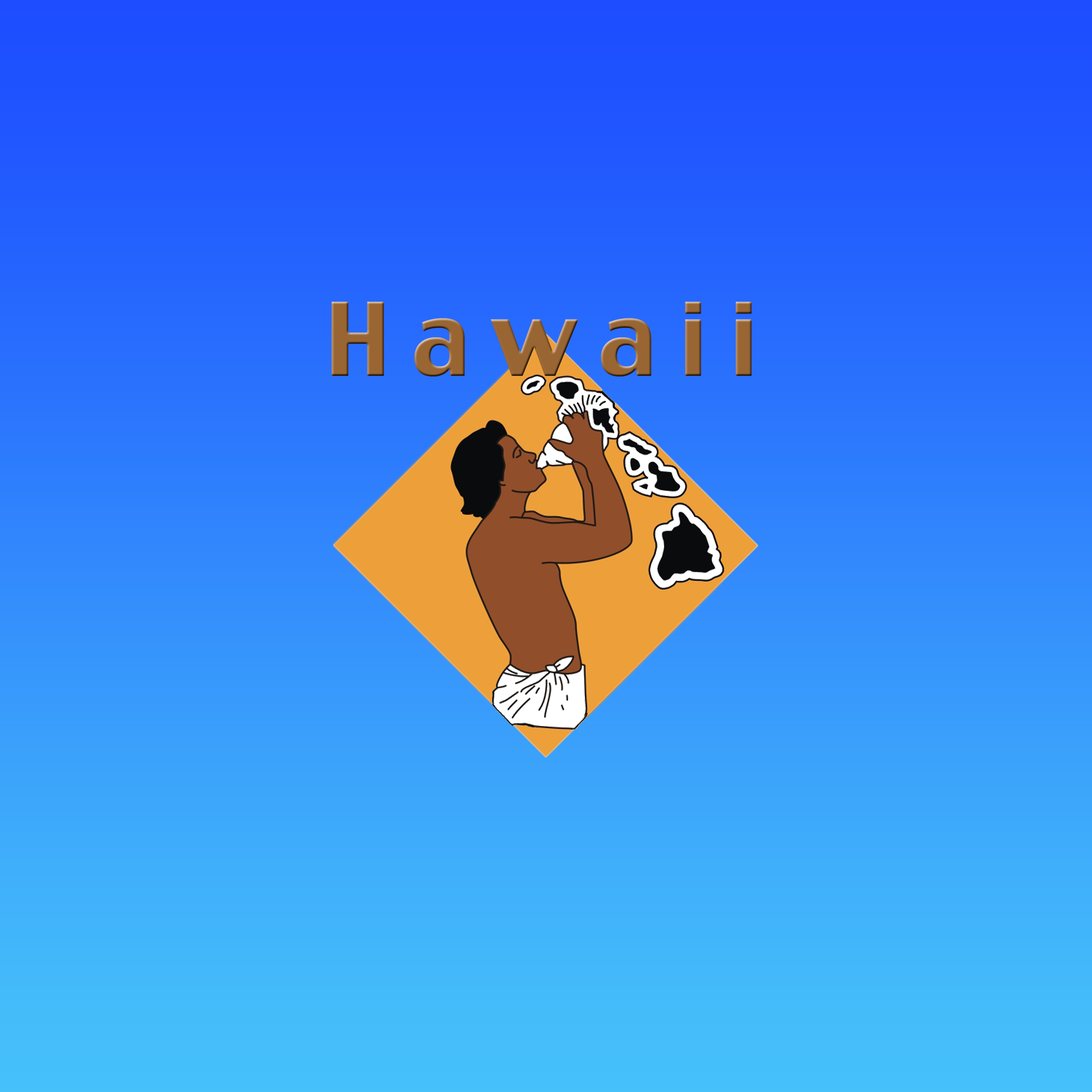
<style>
.page{position:relative;width:1092px;height:1092px}
.page>*{position:absolute;margin:0}
.t1{font:98.9px "CharcoalCY";letter-spacing:0.2em;color:#996633}
</style>
<div class="page">
<p class="t1" style="left:331px;top:302px;width:421px;height:75px">Hawaii</p>
</div>
